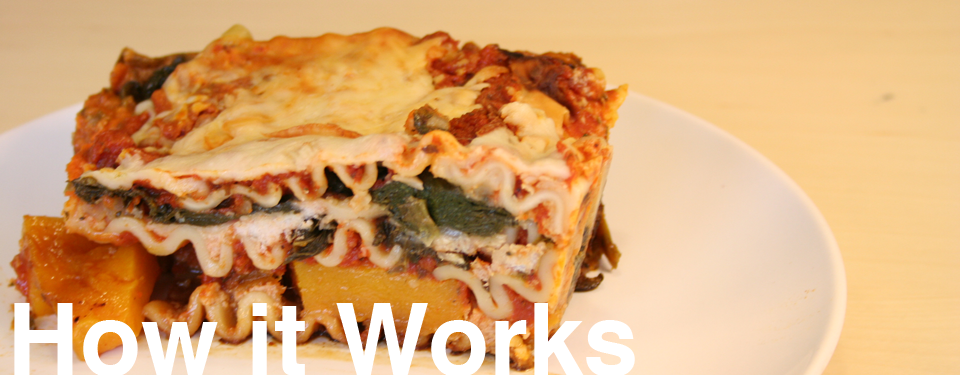
<style>
.page{position:relative;width:960px;height:375px}
.page>*{position:absolute;margin:0}
.t1{font:100px "Helvetica-Bold";color:#ffffff}
</style>
<div class="page">
<p class="t1" style="left:14px;top:303px;width:621px;height:74px">How it Works</p>
</div>
